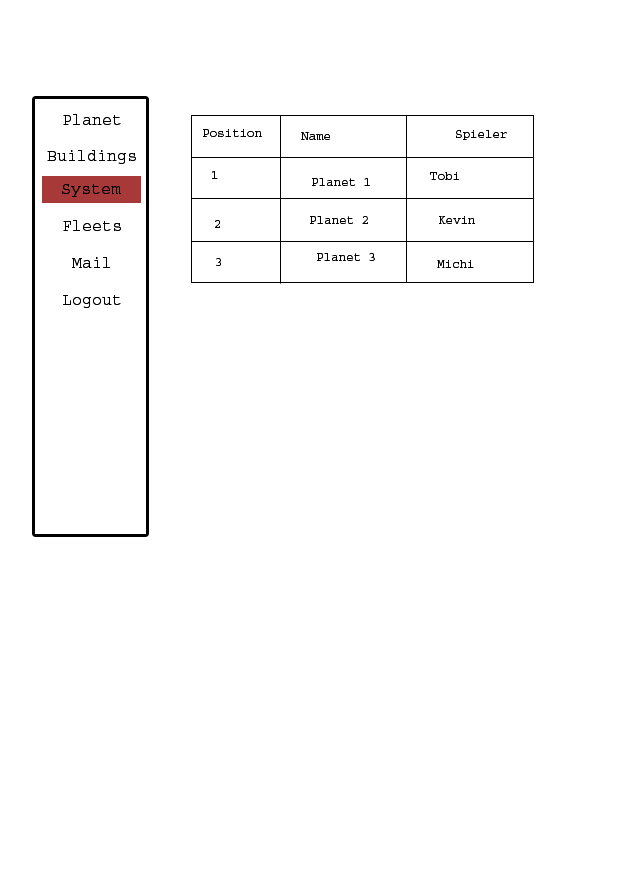
<style>
.page{position:relative;width:620px;height:877px;background:#ffffff}
.page>*{position:absolute;margin:0}
.t1{font:16.7px "Courier";color:#000000}
.t2{font:12.5px "Courier";color:#000000}
</style>
<div class="page">
<p class="t1" style="left:63px;top:114px;width:58px;height:11px">Planet</p>
<p class="t2" style="left:203px;top:129px;width:59px;height:8px">Position</p>
<p class="t2" style="left:301px;top:132px;width:29px;height:8px">Name</p>
<p class="t2" style="left:456px;top:130px;width:51px;height:10px">Spieler</p>
<p class="t1" style="left:47px;top:150px;width:89px;height:14px">Buildings</p>
<p class="t2" style="left:212px;top:171px;width:6px;height:8px">1</p>
<p class="t2" style="left:430px;top:172px;width:29px;height:8px">Tobi</p>
<p class="t1" style="left:62px;top:184px;width:59px;height:13px">System</p>
<p class="t2" style="left:312px;top:178px;width:58px;height:8px">Planet 1</p>
<p class="t1" style="left:63px;top:220px;width:58px;height:11px">Fleets</p>
<p class="t2" style="left:215px;top:220px;width:5px;height:8px">2</p>
<p class="t2" style="left:310px;top:216px;width:58px;height:8px">Planet 2</p>
<p class="t2" style="left:439px;top:216px;width:36px;height:8px">Kevin</p>
<p class="t1" style="left:72px;top:257px;width:38px;height:11px">Mail</p>
<p class="t2" style="left:317px;top:253px;width:58px;height:8px">Planet 3</p>
<p class="t2" style="left:216px;top:258px;width:5px;height:8px">3</p>
<p class="t2" style="left:437px;top:260px;width:37px;height:8px">Michi</p>
<p class="t1" style="left:63px;top:295px;width:58px;height:13px">Logout</p>
</div>
